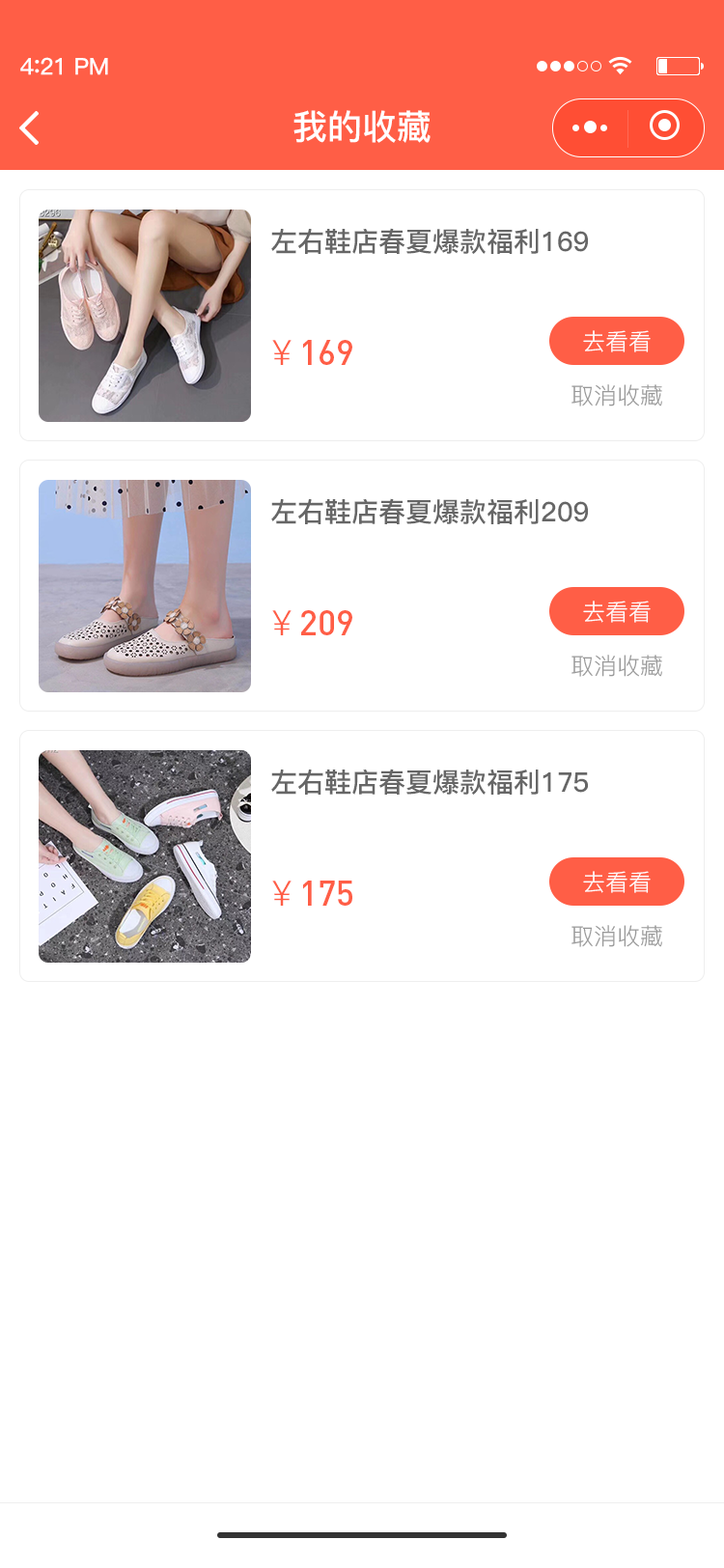
<style>
.page{position:relative;width:724px;height:1568px;background:#ffffff}
.page>*{position:absolute;margin:0}
.t1{font:23.2px "PingFang-SC-Bold";letter-spacing:-0.02em;color:#fefefe}
.t2{font:25.1px "PingFang-SC-Bold";letter-spacing:-0.02em;color:#fefefe}
.t3{font:34.8px "PingFang-SC-Bold";color:#ffffff}
.t4{font:27px "PingFang-SC-Bold";color:#666666}
.t5{font:34.8px "DIN-Medium";color:#ff5e46}
.t6{font:34.8px "PingFang-SC-Regular";color:#ff5e46}
.t7{font:23.2px "PingFang-SC-Regular";color:#ffffff}
.t8{font:23.2px "PingFang-SC-Regular";color:#999999}
</style>
<div class="page">
<p class="t1" style="left:20px;top:57px;width:88px;height:18px">4<span class="t2">:</span>21 PM</p>
<p class="t3" style="left:294px;top:110px;width:137px;height:33px">我的收藏</p>
<p class="t4" style="left:271px;top:228px;width:317px;height:26px">左右鞋店春夏爆款福利169</p>
<p class="t5" style="left:272px;top:340px;width:80px;height:25px"><span class="t6">￥</span>169</p>
<p class="t7" style="left:583px;top:330px;width:68px;height:22px">去看看</p>
<p class="t8" style="left:572px;top:384px;width:90px;height:22px">取消收藏</p>
<p class="t4" style="left:271px;top:498px;width:317px;height:26px">左右鞋店春夏爆款福利209</p>
<p class="t7" style="left:583px;top:601px;width:68px;height:22px">去看看</p>
<p class="t5" style="left:272px;top:610px;width:80px;height:25px"><span class="t6">￥</span>209</p>
<p class="t8" style="left:572px;top:655px;width:90px;height:22px">取消收藏</p>
<p class="t4" style="left:271px;top:769px;width:317px;height:26px">左右鞋店春夏爆款福利175</p>
<p class="t5" style="left:272px;top:881px;width:80px;height:25px"><span class="t6">￥</span>175</p>
<p class="t7" style="left:583px;top:871px;width:68px;height:22px">去看看</p>
<p class="t8" style="left:572px;top:925px;width:90px;height:22px">取消收藏</p>
</div>
